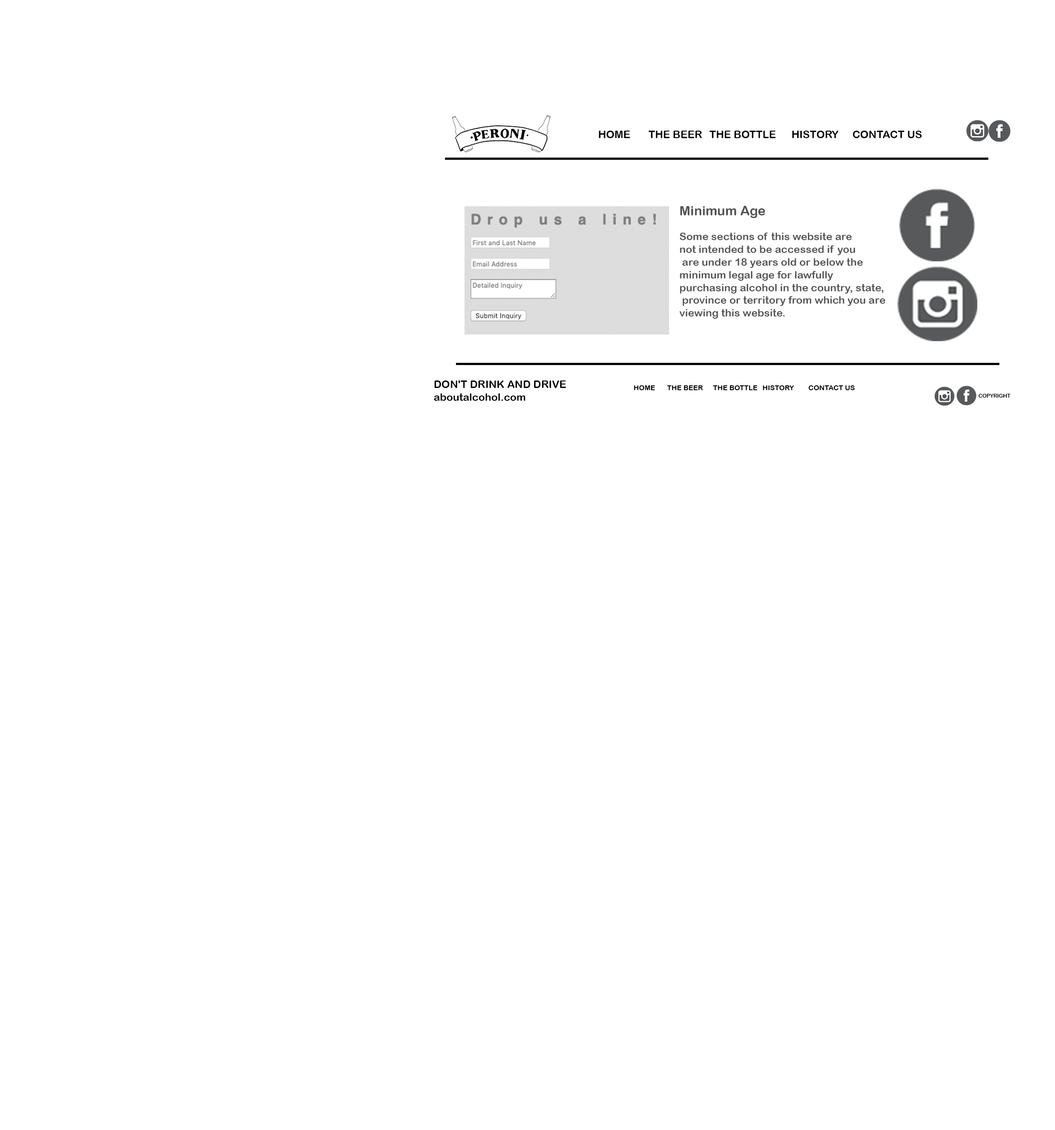
<style>
.page{position:relative;width:1055px;height:1130px;background:#ffffff}
.page>*{position:absolute;margin:0}
.t1{font:10.6px "ArialRoundedMTBold";color:#000000}
.t2{font:13.2px "ArialRoundedMTBold";color:#535353}
.t3{font:10.6px "ArialRoundedMTBold";color:#555454}
.t4{font:7.1px "ArialRoundedMTBold";color:#000000}
.t5{font:5.3px "ArialRoundedMTBold";color:#000000}
</style>
<div class="page">
<p class="t1" style="left:599px;top:131px;width:323px;height:7px">HOME  THE BEER  THE BOTTLE  HISTORY  CONTACT US</p>
<p class="t2" style="left:680px;top:206px;width:85px;height:12px">Minimum Age</p>
<p class="t3" style="left:679px;top:233px;width:207px;height:86px">Some sections of this website are <br>not intended to be accessed if you<br> are under 18 years old or below the <br>minimum legal age for lawfully <br>purchasing alcohol in the country, state,<br> province or territory from which you are <br>viewing this website.</p>
<p class="t1" style="left:434px;top:381px;width:132px;height:20px">DON'T DRINK AND DRIVE<br>aboutalcohol.com</p>
<p class="t4" style="left:634px;top:385px;width:221px;height:5px">HOME  THE BEER  THE BOTTLE  HISTORY  CONTACT US</p>
<p class="t5" style="left:979px;top:394px;width:32px;height:4px">COPYRIGHT</p>
</div>
